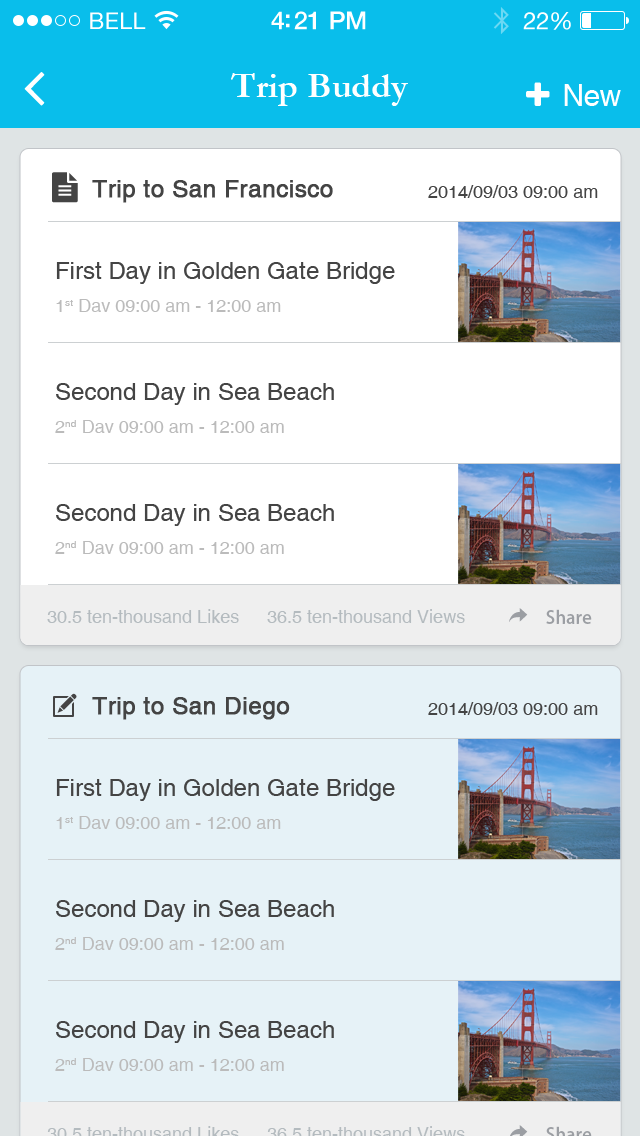
<style>
.page{position:relative;width:640px;height:1136px;background:#ffffff}
.page>*{position:absolute;margin:0}
.t1{font:36px "Garamond-Bold";color:#ffffff}
.t2{font:24px "Helvetica";color:#444444;font-weight:bold}
.t3{font:18px "Helvetica";color:#444444}
.t4{font:24px "Helvetica";color:#444444}
.t5{font:18px "Helvetica";color:#bbbbbb}
.t6{font:18px "Helvetica";color:#b4bbbf}
.t7{font:18px "AdobeHeitiStd-Regular";color:#9b9ea3}
</style>
<div class="page">
<p class="t1" style="left:231px;top:73px;width:177px;height:33px">Trip Buddy</p>
<p class="t2" style="left:92px;top:180px;width:241px;height:23px">Trip to San Francisco</p>
<p class="t3" style="left:428px;top:185px;width:170px;height:13px">2014/09/03 09:00 am</p>
<p class="t4" style="left:56px;top:262px;width:339px;height:22px">First Day in Golden Gate Bridge</p>
<p class="t5" style="left:56px;top:299px;width:225px;height:13px">1st Dav 09:00 am - 12:00 am</p>
<p class="t4" style="left:56px;top:383px;width:278px;height:22px">Second Day in Sea Beach</p>
<p class="t5" style="left:55px;top:420px;width:229px;height:13px">2nd Dav 09:00 am - 12:00 am</p>
<p class="t4" style="left:56px;top:504px;width:278px;height:22px">Second Day in Sea Beach</p>
<p class="t5" style="left:55px;top:541px;width:229px;height:13px">2nd Dav 09:00 am - 12:00 am</p>
<p class="t6" style="left:47px;top:609px;width:192px;height:14px">30.5 ten-thousand Likes</p>
<p class="t6" style="left:267px;top:609px;width:198px;height:14px">36.5 ten-thousand Views</p>
<p class="t7" style="left:546px;top:609px;width:46px;height:15px">Share</p>
<p class="t2" style="left:92px;top:697px;width:198px;height:23px">Trip to San Diego</p>
<p class="t3" style="left:428px;top:702px;width:170px;height:13px">2014/09/03 09:00 am</p>
<p class="t4" style="left:56px;top:779px;width:339px;height:22px">First Day in Golden Gate Bridge</p>
<p class="t5" style="left:56px;top:816px;width:225px;height:13px">1st Dav 09:00 am - 12:00 am</p>
<p class="t4" style="left:56px;top:900px;width:278px;height:22px">Second Day in Sea Beach</p>
<p class="t5" style="left:55px;top:937px;width:229px;height:13px">2nd Dav 09:00 am - 12:00 am</p>
<p class="t4" style="left:56px;top:1021px;width:278px;height:22px">Second Day in Sea Beach</p>
<p class="t5" style="left:55px;top:1058px;width:229px;height:13px">2nd Dav 09:00 am - 12:00 am</p>
</div>
